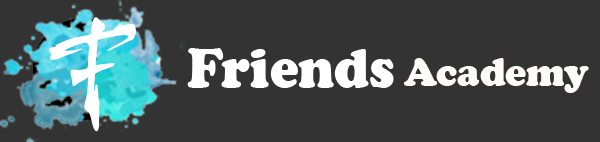
<style>
.page{position:relative;width:600px;height:142px;background:#333333}
.page>*{position:absolute;margin:0}
.t1{font:127.4px "Harukaze-Demo";color:#ffffff}
.t2{font:56.7px "CooperBlack";color:#ffffff;scale:0.95 1}
.t3{font:41.8px "CooperBlack";color:#fffbfb;scale:0.95 1}
</style>
<div class="page">
<p class="t1" style="left:48px;top:17px;width:88px;height:115px">F</p>
<p class="t2" style="left:187px;top:48px;width:207px;height:40px">Friends</p>
<p class="t3" style="left:404px;top:58px;width:185px;height:35px">Academy</p>
</div>
